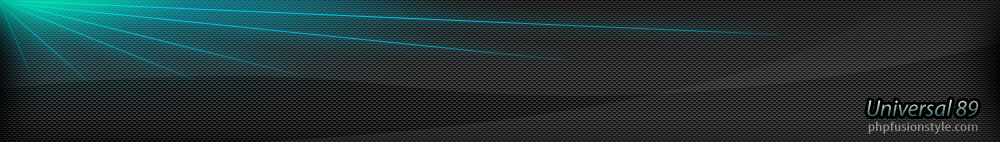
<style>
.page{position:relative;width:1000px;height:142px}
.page>*{position:absolute;margin:0}
.t1{font:23px "MyriadPro-It"}
.t2{font:13.3px "MyriadPro-Cond";color:#8f8f8f;scale:1.38 1}
</style>
<div class="page">
<p class="t1" style="left:867px;top:99px;width:112px;height:18px">Universal 89</p>
<p class="t2" style="left:868px;top:121px;width:110px;height:13px">phpfusionstyle.com</p>
</div>
